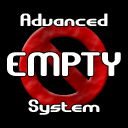
<style>
.page{position:relative;width:128px;height:128px;background:#000000}
.page>*{position:absolute;margin:0}
.t1{font:18px "GravitateBRK";color:#ffffff}
.t2{font:34px "GravitateBRK";color:#ffffff}
</style>
<div class="page">
<p class="t1" style="left:20px;top:13px;width:88px;height:13px">Advanced</p>
<p class="t2" style="left:7px;top:52px;width:114px;height:24px">EMPTY</p>
<p class="t1" style="left:28px;top:99px;width:72px;height:16px">System</p>
</div>
